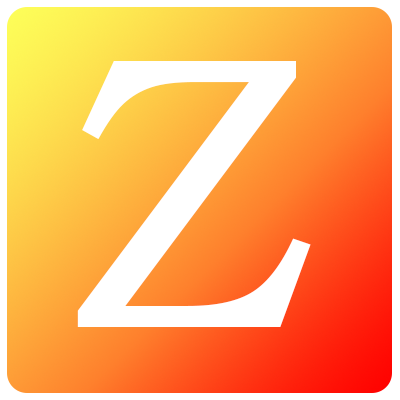
<style>
.page{position:relative;width:400px;height:400px}
.page>*{position:absolute;margin:0}
.t1{font:389.6px "BookmanOldStyle";color:#ffffff}
</style>
<div class="page">
<p class="t1" style="left:77px;top:61px;width:234px;height:266px">Z</p>
</div>
